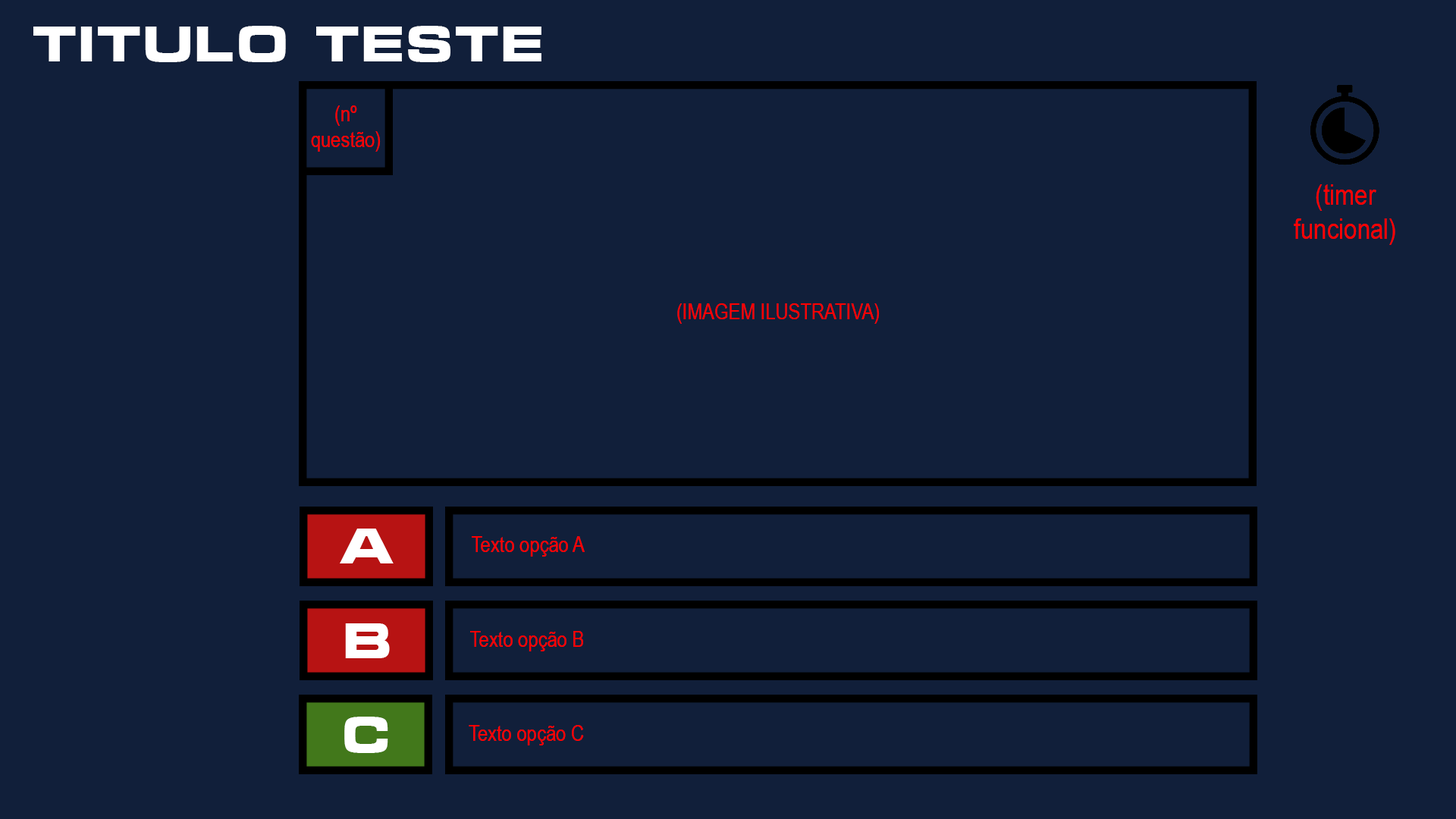
<style>
.page{position:relative;width:1456px;height:819px;background:#111f3a}
.page>*{position:absolute;margin:0}
.t1{font:49px "Micra-Bold";color:#ffffff}
.t2{font:22px "ArialNarrow";color:#ff0000}
.t3{font:28.8px "ArialNarrow";color:#ff0000}
</style>
<div class="page">
<p class="t1" style="left:33px;top:26px;width:508px;height:36px">Titulo teste</p>
<p class="t2" style="left:311px;top:105px;width:70px;height:47px;text-align:center">(nº<br>questão)</p>
<p class="t3" style="left:1294px;top:184px;width:101px;height:61px;text-align:center">(timer<br>funcional)</p>
<p class="t2" style="left:677px;top:303px;width:203px;height:21px">(IMAGEM ILUSTRATIVA)</p>
<p class="t1" style="left:340px;top:529px;width:54px;height:34px">A</p>
<p class="t2" style="left:472px;top:536px;width:113px;height:21px">Texto opção A</p>
<p class="t1" style="left:345px;top:623px;width:45px;height:35px">B</p>
<p class="t2" style="left:470px;top:631px;width:113px;height:20px">Texto opção B</p>
<p class="t1" style="left:344px;top:717px;width:44px;height:36px">C</p>
<p class="t2" style="left:469px;top:725px;width:115px;height:20px">Texto opção C</p>
</div>
